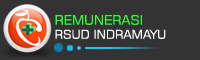
<style>
.page{position:relative;width:200px;height:60px;background:#333333}
.page>*{position:absolute;margin:0}
.t1{font:13px "Square721BT-Roman";color:#31fe3b}
.t2{font:12px "Square721BT-Roman";color:#fdfdfc}
</style>
<div class="page">
<p class="t1" style="left:55px;top:15px;width:87px;height:10px">REMUNERASI</p>
<p class="t2" style="left:55px;top:29px;width:111px;height:10px">RSUD INDRAMAYU</p>
</div>
